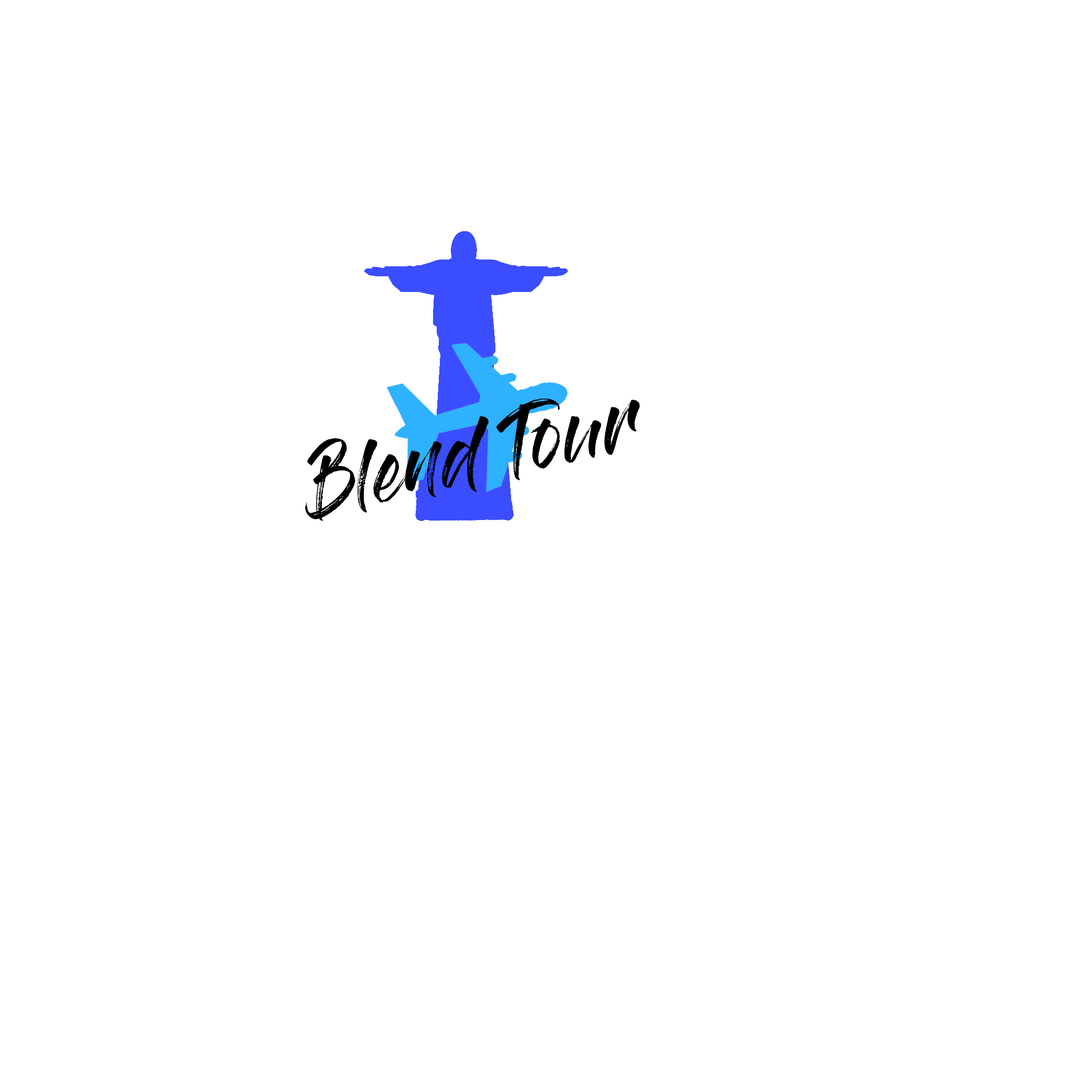
<style>
.page{position:relative;width:1092px;height:1092px;background:#ffffff}
.page>*{position:absolute;margin:0}
.t1{font:65.5px "GlossAndBloom";color:#000000}
</style>
<div class="page">
<p class="t1" style="left:305px;top:398px;width:335px;height:123px;rotate:-12deg">Blend Tour</p>
</div>
